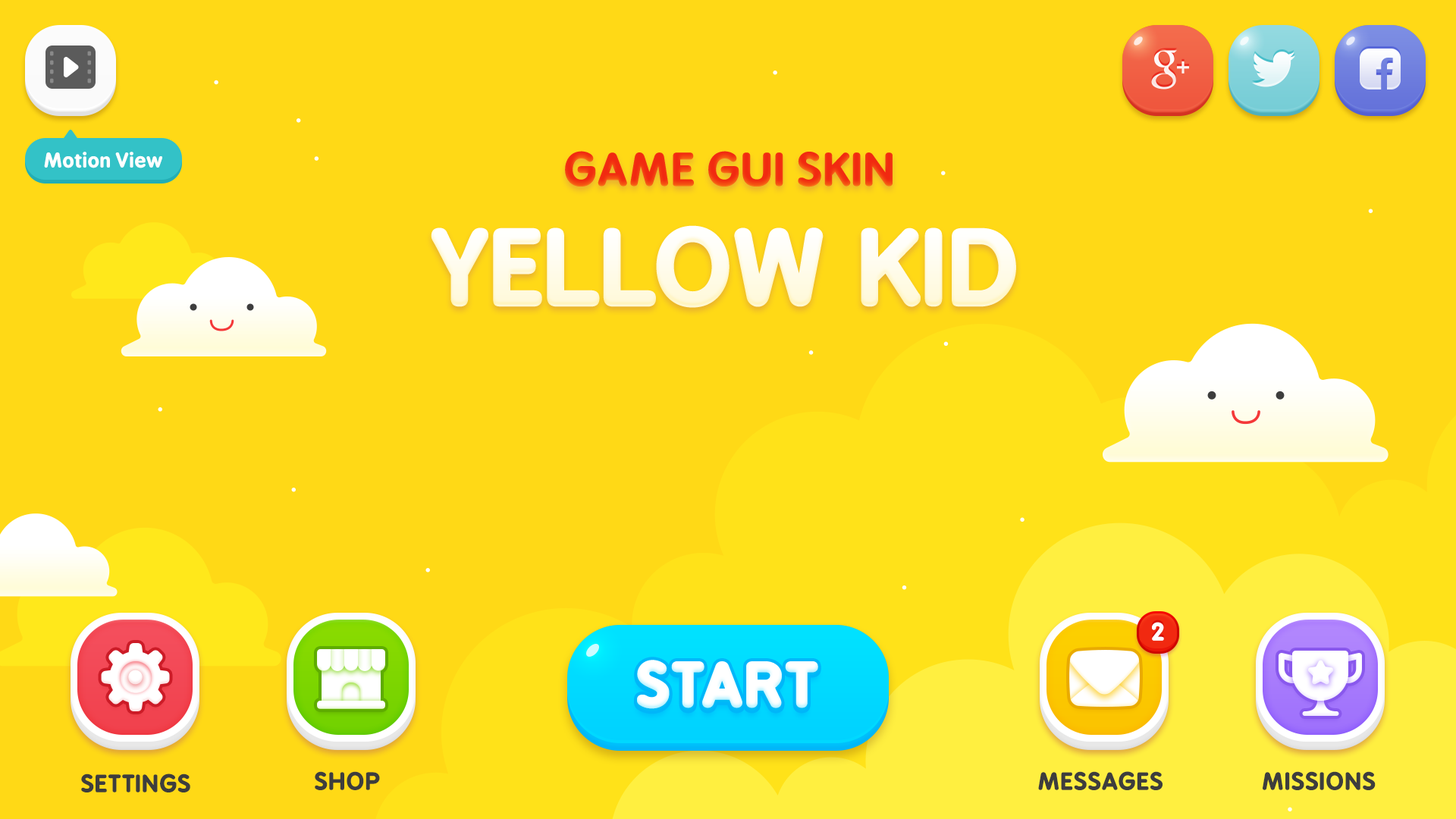
<style>
.page{position:relative;width:1456px;height:819px;background:#ffd916}
.page>*{position:absolute;margin:0}
.t1{font:19.5px "BPreplay-Bold";letter-spacing:-0.025em;color:#ffffff;scale:1.05 1}
.t2{font:43.2px "BPreplay-Bold";color:#f12910;text-transform:uppercase;scale:1.05 1}
.t3{font:100.9px "BPreplay-Bold";color:#fffbe8;text-transform:uppercase;scale:1.05 1}
.t4{font:23.8px "BPreplay-Bold";letter-spacing:-0.1em;color:#ffffff;scale:1.06 1}
.t5{font:57.6px "BPreplay-Bold";color:#ffffff;text-transform:uppercase;font-weight:bold;scale:1.05 1}
.t6{font:22.8px "BPreplay-Bold";color:#3d3d3d;scale:1.07 1}
.t7{font:22.8px "BPreplay-Bold";color:#3d3d3d;text-transform:uppercase;scale:1.07 1}
</style>
<div class="page">
<p class="t1" style="left:44px;top:152px;width:118px;height:16px">Motion View</p>
<p class="t2" style="left:565px;top:151px;width:328px;height:36px">Game GUI Skin</p>
<p class="t3" style="left:431px;top:225px;width:585px;height:83px">Yellow Kid</p>
<p class="t4" style="left:1152px;top:622px;width:12px;height:19px">2</p>
<p class="t5" style="left:637px;top:660px;width:181px;height:49px">START</p>
<p class="t6" style="left:81px;top:773px;width:109px;height:19px">SETTINGS</p>
<p class="t7" style="left:315px;top:771px;width:65px;height:19px">shop</p>
<p class="t6" style="left:1038px;top:771px;width:125px;height:19px">MESSAGES</p>
<p class="t6" style="left:1263px;top:771px;width:113px;height:19px">MISSIONS</p>
</div>
